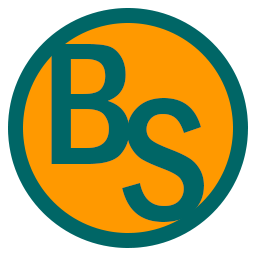
<style>
.page{position:relative;width:256px;height:256px;background:#ff9900}
.page>*{position:absolute;margin:0}
.t1{font:180px "FranklinGothic-MediumCond";color:#006666}
</style>
<div class="page">
<p class="t1" style="left:51px;top:44px;width:79px;height:120px">B</p>
<p class="t1" style="left:122px;top:98px;width:82px;height:124px">S</p>
</div>
